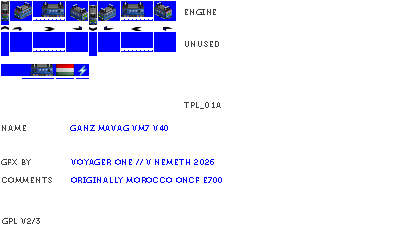
<style>
.page{position:relative;width:400px;height:230px;background:#ffffff}
.page>*{position:absolute;margin:0}
.t1{font:8px "Museo700-Regular";letter-spacing:0.075em;color:#404040;text-transform:uppercase}
.t2{font:8px "Museo700-Regular";letter-spacing:0.075em;color:#0000ff;text-transform:uppercase}
</style>
<div class="page">
<p class="t1" style="left:185px;top:9px;width:31px;height:6px">engine</p>
<p class="t1" style="left:185px;top:41px;width:34px;height:6px">unused</p>
<p class="t1" style="left:184px;top:102px;width:37px;height:7px">tpl_01a</p>
<p class="t1" style="left:2px;top:125px;width:24px;height:6px">name</p>
<p class="t2" style="left:70px;top:125px;width:98px;height:6px">Ganz MAVAG VM7 V40</p>
<p class="t1" style="left:1px;top:159px;width:30px;height:6px">gfx by</p>
<p class="t2" style="left:71px;top:159px;width:143px;height:6px">voyager one // v nemeth 2026</p>
<p class="t1" style="left:2px;top:177px;width:50px;height:6px">comments</p>
<p class="t2" style="left:71px;top:177px;width:151px;height:6px">originally morocco oncf e700</p>
<p class="t1" style="left:2px;top:218px;width:38px;height:6px">gpl v2/3</p>
</div>
